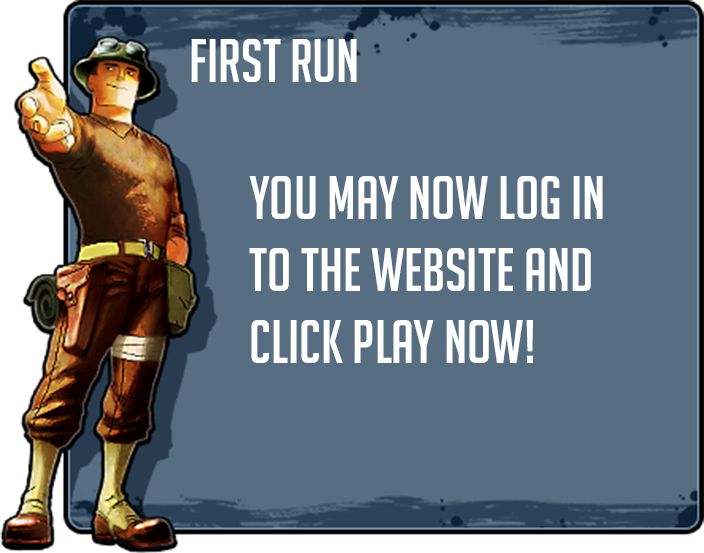
<style>
.page{position:relative;width:704px;height:553px;background:#576d81}
.page>*{position:absolute;margin:0}
.t1{font:60px "BigNoodleTitling";color:#ffffff}
</style>
<div class="page">
<p class="t1" style="left:191px;top:39px;width:166px;height:43px">First run</p>
<p class="t1" style="left:249px;top:176px;width:354px;height:187px">you may now log in to the website and click play now!</p>
</div>
